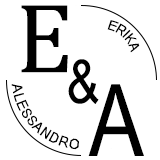
<style>
.page{position:relative;width:160px;height:160px;background:#ffffff}
.page>*{position:absolute;margin:0}
.t1{font:100px "Cambria";color:#000000}
.t2{font:13.7px "ArialNarrow";color:#000000;scale:0.89 1}
.t3{font:60px "ArialNarrow";color:#000000}
.t4{font:14px "ArialNarrow";color:#000000}
.t5{font:100px "ArialNarrow";color:#000000}
</style>
<div class="page">
<p class="t1" style="left:21px;top:5px;width:47px;height:68px">E</p>
<p class="t2" style="left:107px;top:20px;width:33px;height:33px;rotate:44deg">ERIKA</p>
<p class="t3" style="left:68px;top:59px;width:31px;height:45px">&amp;</p>
<p class="t4" style="left:11px;top:84px;width:68px;height:66px;rotate:44deg">ALESSANDRO</p>
<p class="t5" style="left:88px;top:84px;width:56px;height:72px">A</p>
</div>
